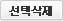
<style>
.page{position:relative;width:63px;height:21px}
.page>*{position:absolute;margin:0}
.t1{font:11px "YDIWebDotum";color:#333333;font-weight:bold}
</style>
<div class="page">
<p class="t1" style="left:9px;top:6px;width:43px;height:10px">선택삭제</p>
</div>
